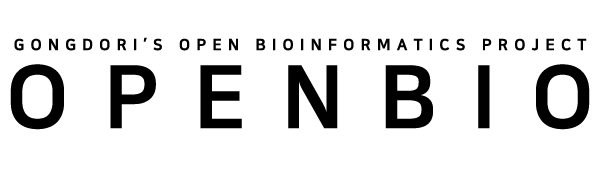
<style>
.page{position:relative;width:600px;height:170px;background:#ffffff}
.page>*{position:absolute;margin:0}
.t1{font:15.5px "NanumSquareEB";letter-spacing:0.4em;color:#000000}
.t2{font:87px "NanumSquareEB";letter-spacing:0.4em;color:#000000}
</style>
<div class="page">
<p class="t1" style="left:14px;top:37px;width:573px;height:14px">GONGDORI’S OPEN BIOINFORMATICS PROJECT</p>
<p class="t2" style="left:10px;top:64px;width:580px;height:66px">OPENBIO</p>
</div>
